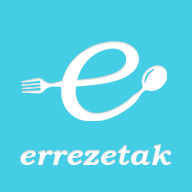
<style>
.page{position:relative;width:192px;height:192px;background:#43cee6}
.page>*{position:absolute;margin:0}
.t1{font:30px "BookmanOldStyle-BoldItalic";color:#ffffff}
</style>
<div class="page">
<p class="t1" style="left:20px;top:144px;width:152px;height:21px">errezetak</p>
</div>
